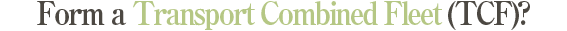
<style>
.page{position:relative;width:567px;height:31px;background:#ffffff}
.page>*{position:absolute;margin:0}
.t1{font:32px "RyuminPro-ExBold";letter-spacing:-0.08em;color:#b5c784;scale:0.9 1}
.t2{font:32px "RyuminPro-ExBold";letter-spacing:-0.08em;color:#4c4842;scale:0.9 1}
</style>
<div class="page">
<p class="t1" style="left:37px;top:1px;width:493px;height:29px"><span class="t2">Form a </span>Transport Combined Fleet<span class="t2"> (TCF)?</span></p>
</div>
